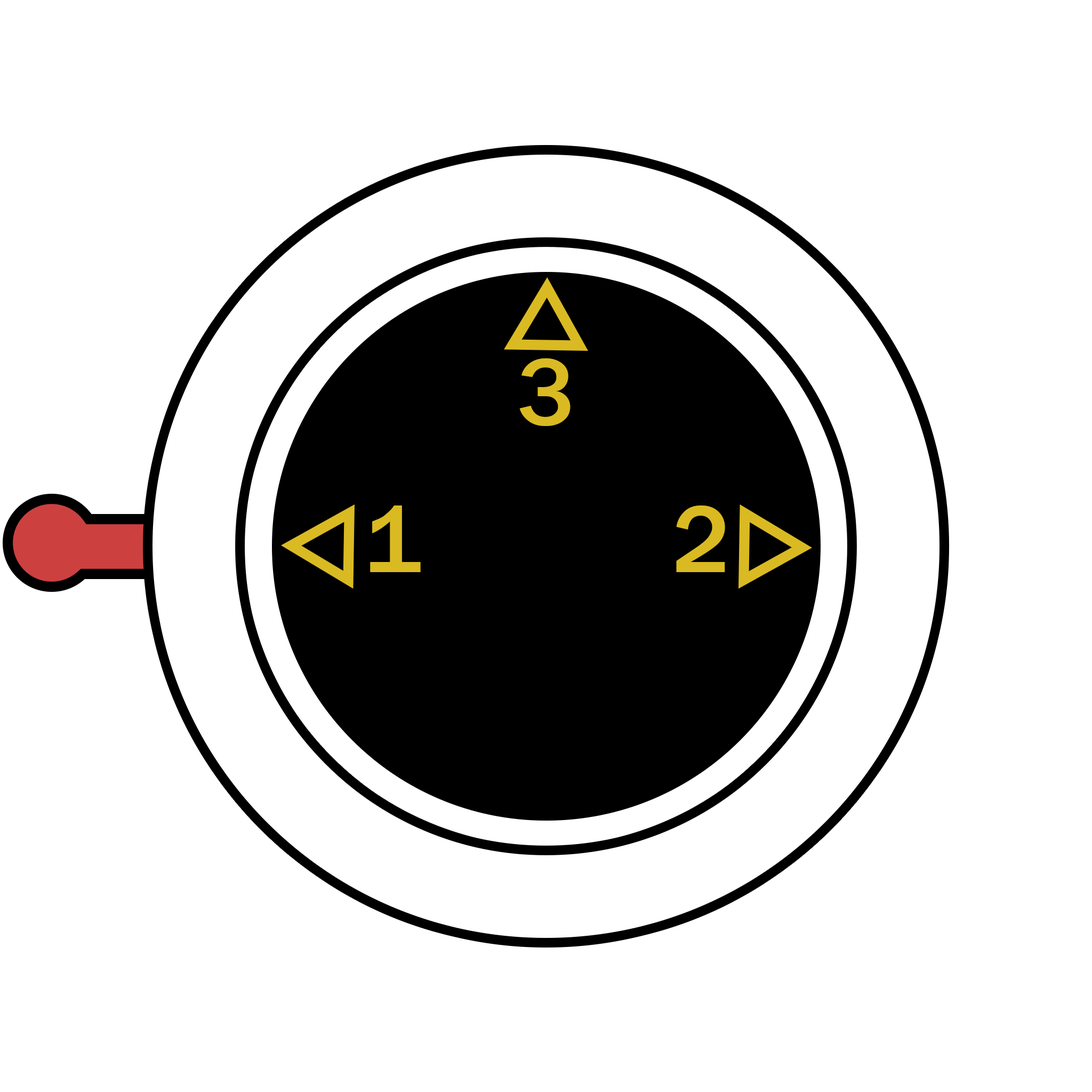
<style>
.page{position:relative;width:1092px;height:1092px;background:#ffffff}
.page>*{position:absolute;margin:0}
.t1{font:98.4px "FranklinGothic-Medium";color:#daba22}
</style>
<div class="page">
<p class="t1" style="left:519px;top:358px;width:52px;height:68px">3</p>
<p class="t1" style="left:370px;top:505px;width:51px;height:67px">1</p>
<p class="t1" style="left:676px;top:505px;width:49px;height:67px">2</p>
</div>
